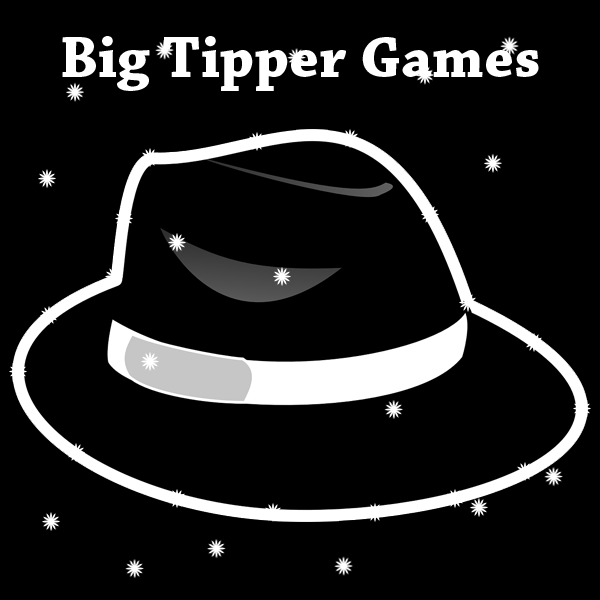
<style>
.page{position:relative;width:600px;height:600px;background:#000000}
.page>*{position:absolute;margin:0}
.t1{font:60px "ChaparralPro-Bold";color:#ffffff}
</style>
<div class="page">
<p class="t1" style="left:62px;top:36px;width:477px;height:55px">Big Tipper Games</p>
</div>
